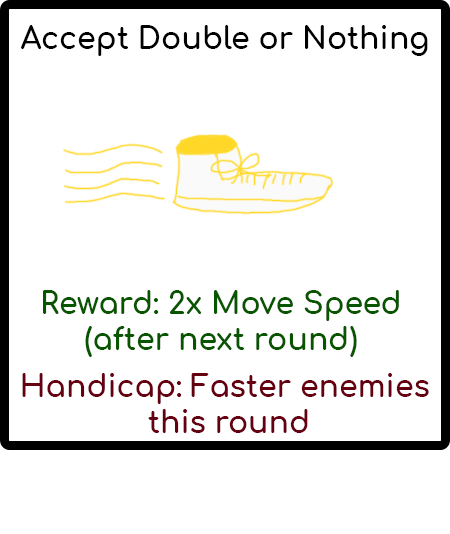
<style>
.page{position:relative;width:450px;height:534px;background:#ffffff}
.page>*{position:absolute;margin:0}
.t1{font:30px "Comfortaa-Bold";color:#000000}
.t2{font:30px "Comfortaa-Bold";color:#085500}
.t3{font:30px "Comfortaa-Bold";color:#660011}
</style>
<div class="page">
<p class="t1" style="left:21px;top:25px;width:407px;height:31px">Accept Double or Nothing</p>
<p class="t2" style="left:43px;top:290px;width:356px;height:67px;text-align:center">Reward: 2x Move Speed<br>(after next round)</p>
<p class="t3" style="left:22px;top:373px;width:407px;height:60px;text-align:center">Handicap: Faster enemies <br>this round</p>
</div>
